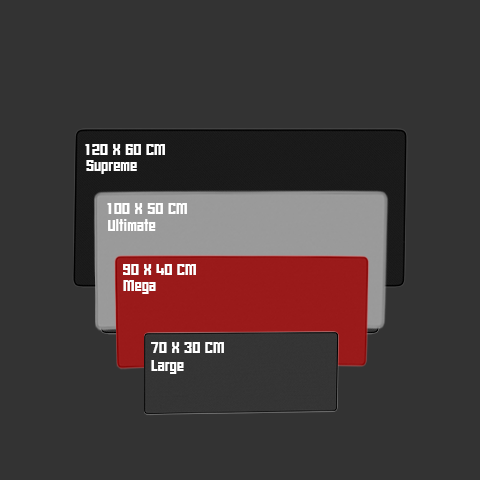
<style>
.page{position:relative;width:480px;height:480px;background:#333333}
.page>*{position:absolute;margin:0}
.t1{font:18px "DBSiamSquareX-ExtraBold";color:#ffffff}
</style>
<div class="page">
<p class="t1" style="left:85px;top:144px;width:80px;height:11px">120 X 60 CM</p>
<p class="t1" style="left:86px;top:160px;width:51px;height:14px">Supreme</p>
<p class="t1" style="left:107px;top:203px;width:80px;height:11px">100 X 50 CM</p>
<p class="t1" style="left:108px;top:219px;width:48px;height:12px">Ultimate</p>
<p class="t1" style="left:123px;top:264px;width:73px;height:11px">90 X 40 CM</p>
<p class="t1" style="left:123px;top:280px;width:33px;height:14px">Mega</p>
<p class="t1" style="left:151px;top:342px;width:73px;height:11px">70 X 30 CM</p>
<p class="t1" style="left:151px;top:360px;width:33px;height:14px">Large</p>
</div>
